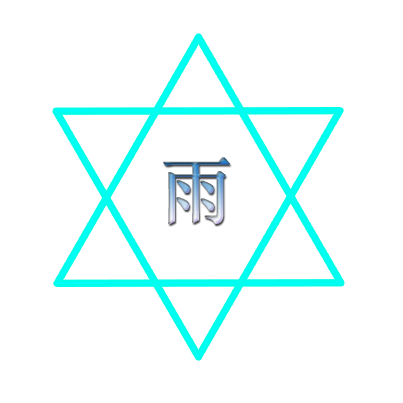
<style>
.page{position:relative;width:403px;height:403px;background:#ffffff}
.page>*{position:absolute;margin:0}
.t1{font:76.4px "SimSun";letter-spacing:-0.02em;font-weight:bold}
</style>
<div class="page">
<p class="t1" style="left:163px;top:157px;width:67px;height:67px">雨</p>
</div>
